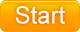
<style>
.page{position:relative;width:80px;height:32px}
.page>*{position:absolute;margin:0}
.t1{font:24px "ArialMT";color:#ffffff}
</style>
<div class="page">
<p class="t1" style="left:15px;top:3px;width:50px;height:28px">Start</p>
</div>
